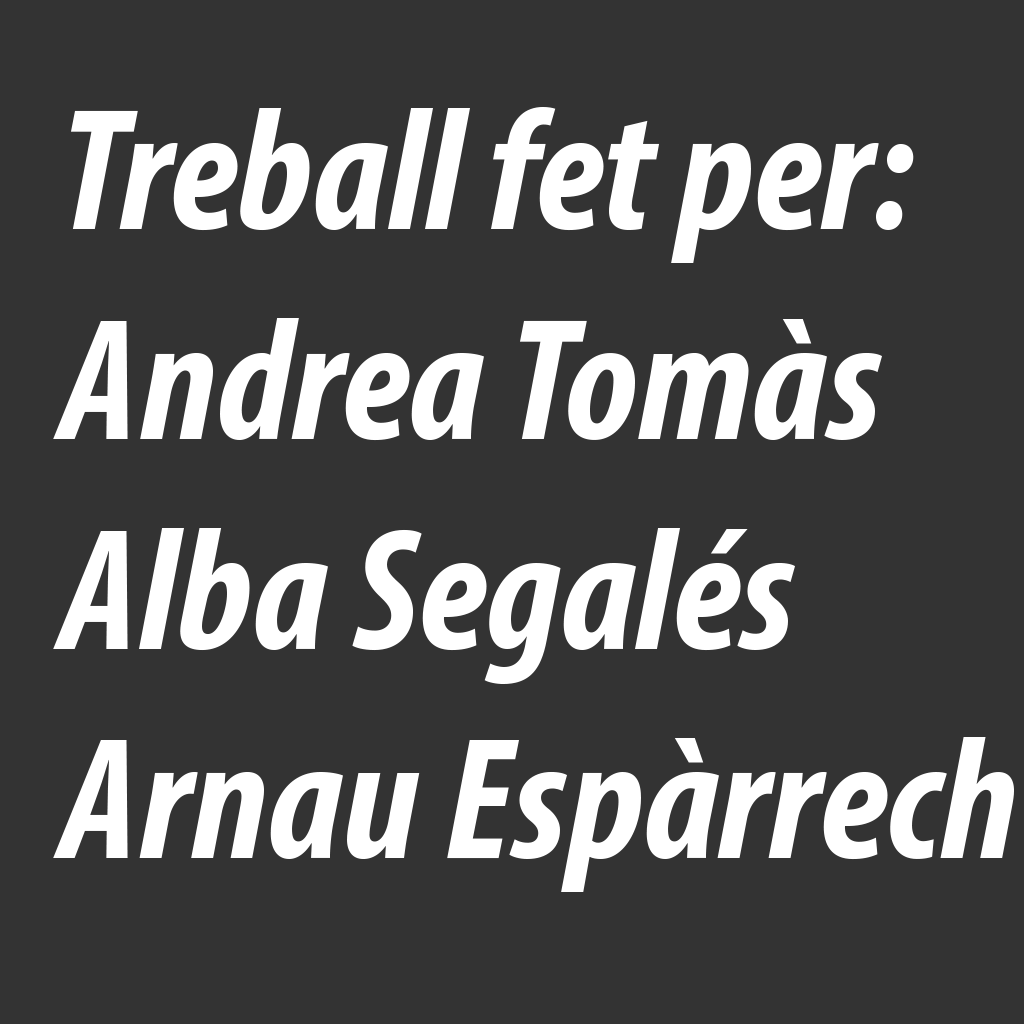
<style>
.page{position:relative;width:1024px;height:1024px;background:#333333}
.page>*{position:absolute;margin:0}
.t1{font:174.9px "MyriadPro-BoldCondIt";color:#ffffff}
</style>
<div class="page">
<p class="t1" style="left:53px;top:107px;width:961px;height:785px">Treball fet per:<br>Andrea Tomàs<br>Alba Segalés<br>Arnau Espàrrech</p>
</div>
